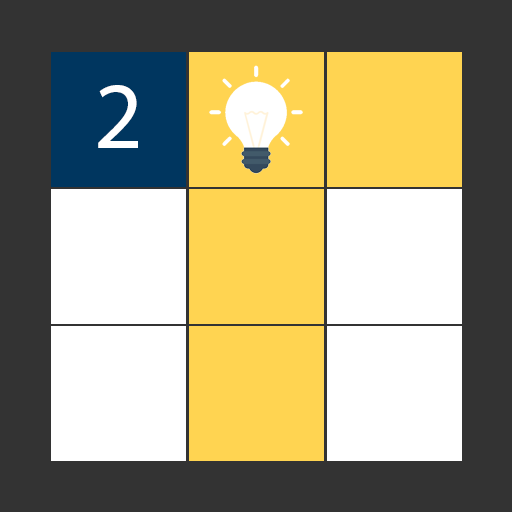
<style>
.page{position:relative;width:512px;height:512px;background:#333333}
.page>*{position:absolute;margin:0}
.t1{font:96px "MyriadPro-Regular";color:#ffffff}
</style>
<div class="page">
<p class="t1" style="left:98px;top:85px;width:40px;height:63px">2</p>
</div>
